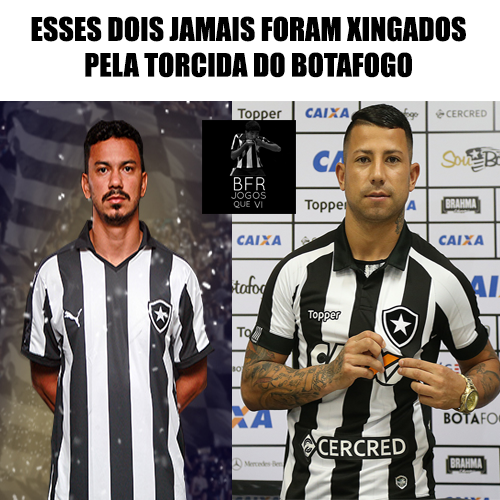
<style>
.page{position:relative;width:500px;height:500px}
.page>*{position:absolute;margin:0}
.t1{font:29.9px "Impact";color:#000000}
</style>
<div class="page">
<p class="t1" style="left:31px;top:16px;width:435px;height:62px;text-align:center">ESSES DOIS JAMAIS FORAM XINGADOS <br>PELA TORCIDA DO BOTAFOGO</p>
</div>
